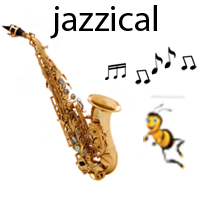
<style>
.page{position:relative;width:200px;height:200px;background:#ffffff}
.page>*{position:absolute;margin:0}
.t1{font:36px "MyriadPro-Regular";color:#000000}
</style>
<div class="page">
<p class="t1" style="left:50px;top:5px;width:107px;height:34px">jazzical</p>
</div>
